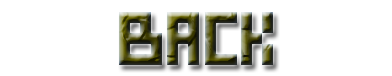
<style>
.page{position:relative;width:392px;height:76px;background:#ffffff}
.page>*{position:absolute;margin:0}
.t1{font:74.1px "DSPixelCyr"}
</style>
<div class="page">
<p class="t1" style="left:119px;top:12px;width:154px;height:53px">back</p>
</div>
